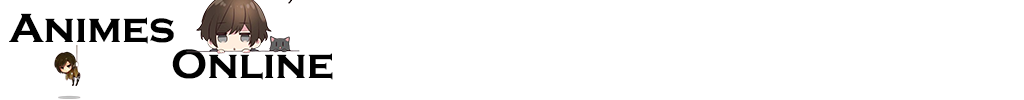
<style>
.page{position:relative;width:1024px;height:100px;background:#ffffff}
.page>*{position:absolute;margin:0}
.t1{font:42.3px "CopperplateGothic-Bold";color:#010101}
</style>
<div class="page">
<p class="t1" style="left:9px;top:13px;width:165px;height:31px">Animes</p>
<p class="t1" style="left:172px;top:49px;width:161px;height:31px">Online</p>
</div>
